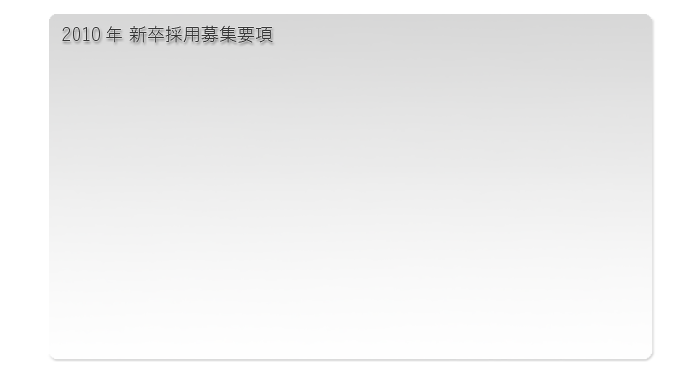
<style>
.page{position:relative;width:696px;height:366px}
.page>*{position:absolute;margin:0}
.t1{font:18px "YuGothicStd-L";color:#363636}
</style>
<div class="page">
<p class="t1" style="left:62px;top:25px;width:211px;height:18px">2010年 新卒採用募集要項</p>
</div>
